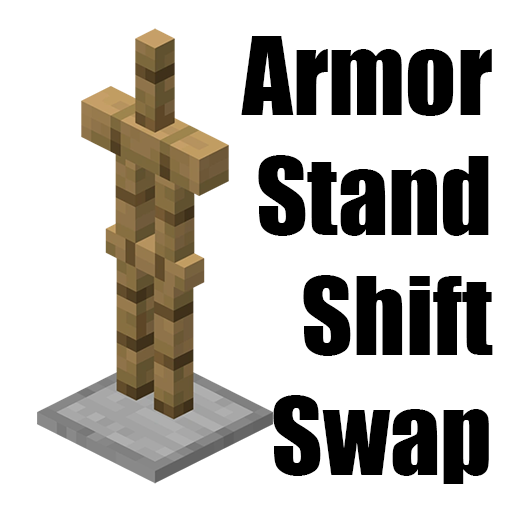
<style>
.page{position:relative;width:512px;height:512px;background:#ffffff}
.page>*{position:absolute;margin:0}
.t1{font:100px "Impact";color:#000000}
</style>
<div class="page">
<p class="t1" style="left:241px;top:36px;width:252px;height:448px;text-align:right">Armor<br>Stand<br>Shift<br>Swap</p>
</div>
